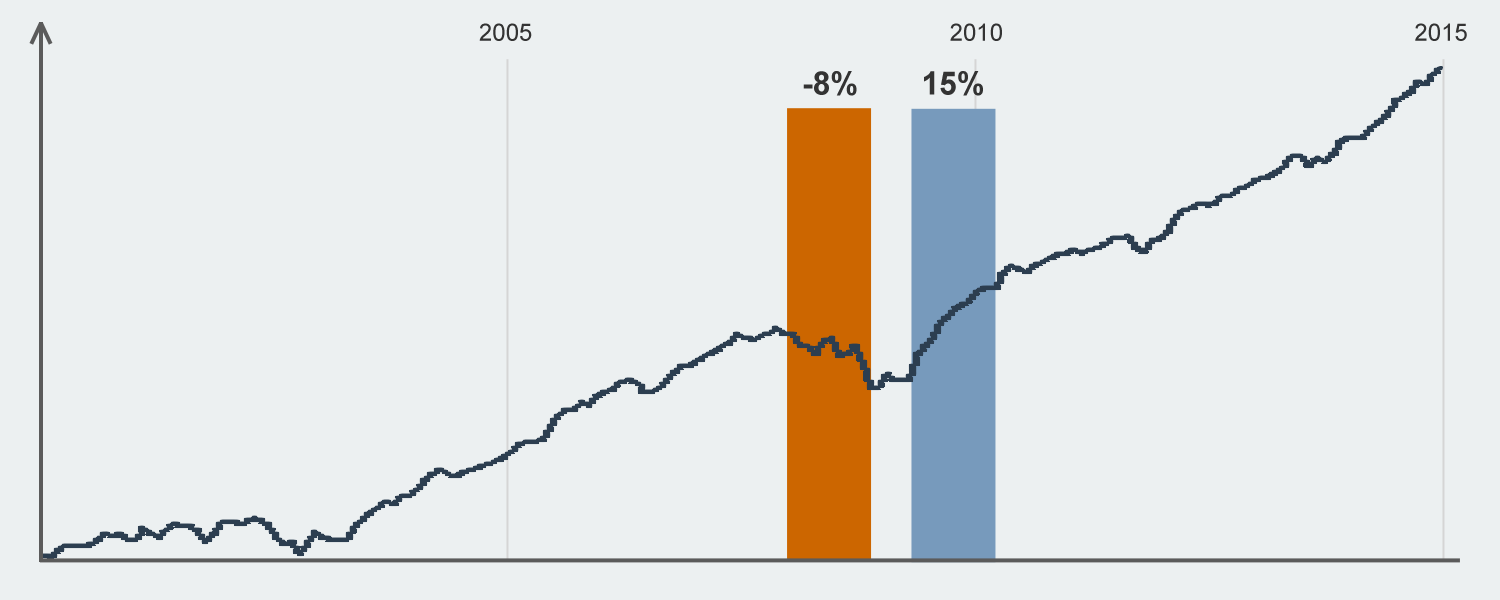
<style>
.page{position:relative;width:1500px;height:600px;background:#ecf0f1}
.page>*{position:absolute;margin:0}
.t1{font:24px "ArialMT";color:#333333}
.t2{font:32px "Arial-BoldMT";color:#333333}
</style>
<div class="page">
<p class="t1" style="left:479px;top:23px;width:53px;height:18px">2005</p>
<p class="t1" style="left:950px;top:23px;width:52px;height:18px">2010</p>
<p class="t1" style="left:1415px;top:23px;width:52px;height:18px">2015</p>
<p class="t2" style="left:803px;top:71px;width:54px;height:25px">-8%</p>
<p class="t2" style="left:924px;top:71px;width:59px;height:25px">15%</p>
</div>
